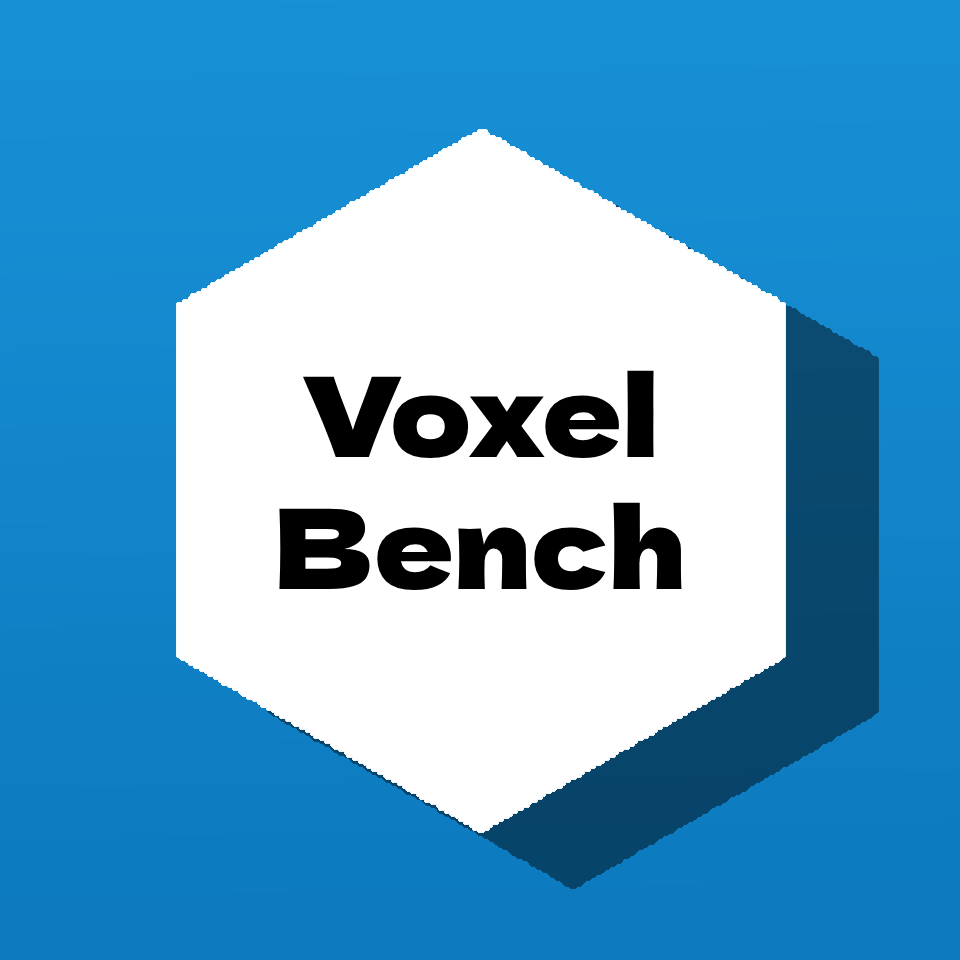
<style>
.page{position:relative;width:960px;height:960px;background:#ffffff}
.page>*{position:absolute;margin:0}
.t1{font:110.6px "DelaGothicOne-Regular";color:#000000}
</style>
<div class="page">
<p class="t1" style="left:279px;top:370px;width:403px;height:220px;text-align:center">Voxel<br>Bench</p>
</div>
